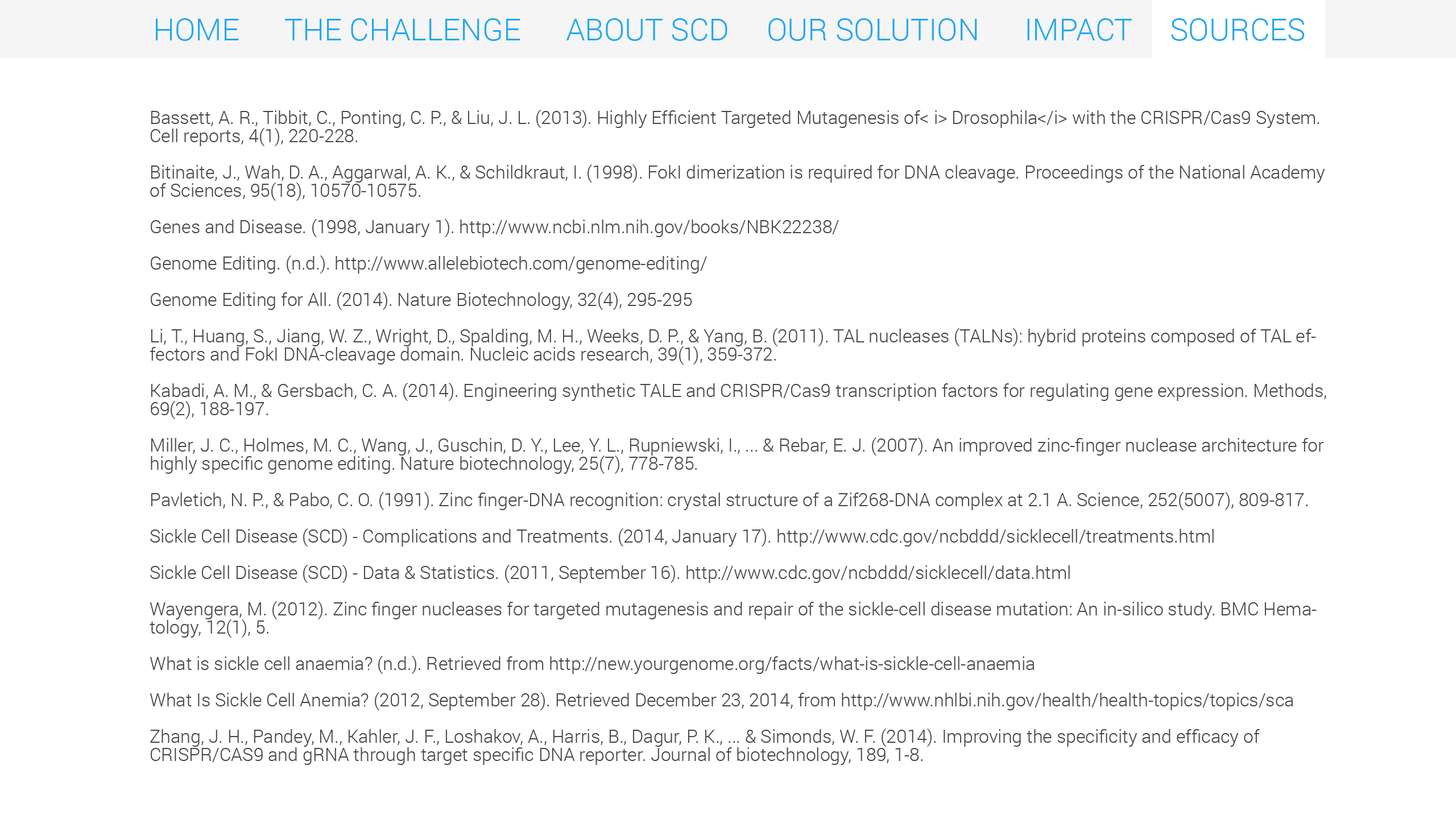
<style>
.page{position:relative;width:1456px;height:819px;background:#ffffff}
.page>*{position:absolute;margin:0}
.t1{font:30.7px "Roboto-Light";color:#22a7f0}
.t2{font:18.2px/18.2px "Roboto-Light";color:#464646}
</style>
<div class="page">
<p class="t1" style="left:156px;top:18px;width:1149px;height:23px">HOME      THE CHALLENGE      ABOUT SCD     OUR SOLUTION      IMPACT     SOURCES</p>
<p class="t2" style="left:150px;top:110px;width:1176px;height:655px">Bassett, A. R., Tibbit, C., Ponting, C. P., &amp; Liu, J. L. (2013). Highly Efficient Targeted Mutagenesis of&lt; i&gt; Drosophila&lt;/i&gt; with the CRISPR/Cas9 System. Cell reports, 4(1), 220-228.<br><br>Bitinaite, J., Wah, D. A., Aggarwal, A. K., &amp; Schildkraut, I. (1998). FokI dimerization is required for DNA cleavage. Proceedings of the National Academy of Sciences, 95(18), 10570-10575.<br><br>Genes and Disease. (1998, January 1). http://www.ncbi.nlm.nih.gov/books/NBK22238/<br><br>Genome Editing. (n.d.). http://www.allelebiotech.com/genome-editing/<br><br>Genome Editing for All. (2014). Nature Biotechnology, 32(4), 295-295<br><br>Li, T., Huang, S., Jiang, W. Z., Wright, D., Spalding, M. H., Weeks, D. P., &amp; Yang, B. (2011). TAL nucleases (TALNs): hybrid proteins composed of TAL effectors and FokI DNA-cleavage domain. Nucleic acids research, 39(1), 359-372.<br><br>Kabadi, A. M., &amp; Gersbach, C. A. (2014). Engineering synthetic TALE and CRISPR/Cas9 transcription factors for regulating gene expression. Methods, 69(2), 188-197.<br><br>Miller, J. C., Holmes, M. C., Wang, J., Guschin, D. Y., Lee, Y. L., Rupniewski, I., ... &amp; Rebar, E. J. (2007). An improved zinc-finger nuclease architecture for highly specific genome editing. Nature biotechnology, 25(7), 778-785.<br><br>Pavletich, N. P., &amp; Pabo, C. O. (1991). Zinc finger-DNA recognition: crystal structure of a Zif268-DNA complex at 2.1 A. Science, 252(5007), 809-817.<br><br>Sickle Cell Disease (SCD) - Complications and Treatments. (2014, January 17). http://www.cdc.gov/ncbddd/sicklecell/treatments.html<br><br>Sickle Cell Disease (SCD) - Data &amp; Statistics. (2011, September 16). http://www.cdc.gov/ncbddd/sicklecell/data.html<br><br>Wayengera, M. (2012). Zinc finger nucleases for targeted mutagenesis and repair of the sickle-cell disease mutation: An in-silico study. BMC Hematology, 12(1), 5.<br><br>What is sickle cell anaemia? (n.d.). Retrieved from http://new.yourgenome.org/facts/what-is-sickle-cell-anaemia<br><br>What Is Sickle Cell Anemia? (2012, September 28). Retrieved December 23, 2014, from http://www.nhlbi.nih.gov/health/health-topics/topics/sca<br><br>Zhang, J. H., Pandey, M., Kahler, J. F., Loshakov, A., Harris, B., Dagur, P. K., ... &amp; Simonds, W. F. (2014). Improving the specificity and efficacy of CRISPR/CAS9 and gRNA through target specific DNA reporter. Journal of biotechnology, 189, 1-8.</p>
</div>
